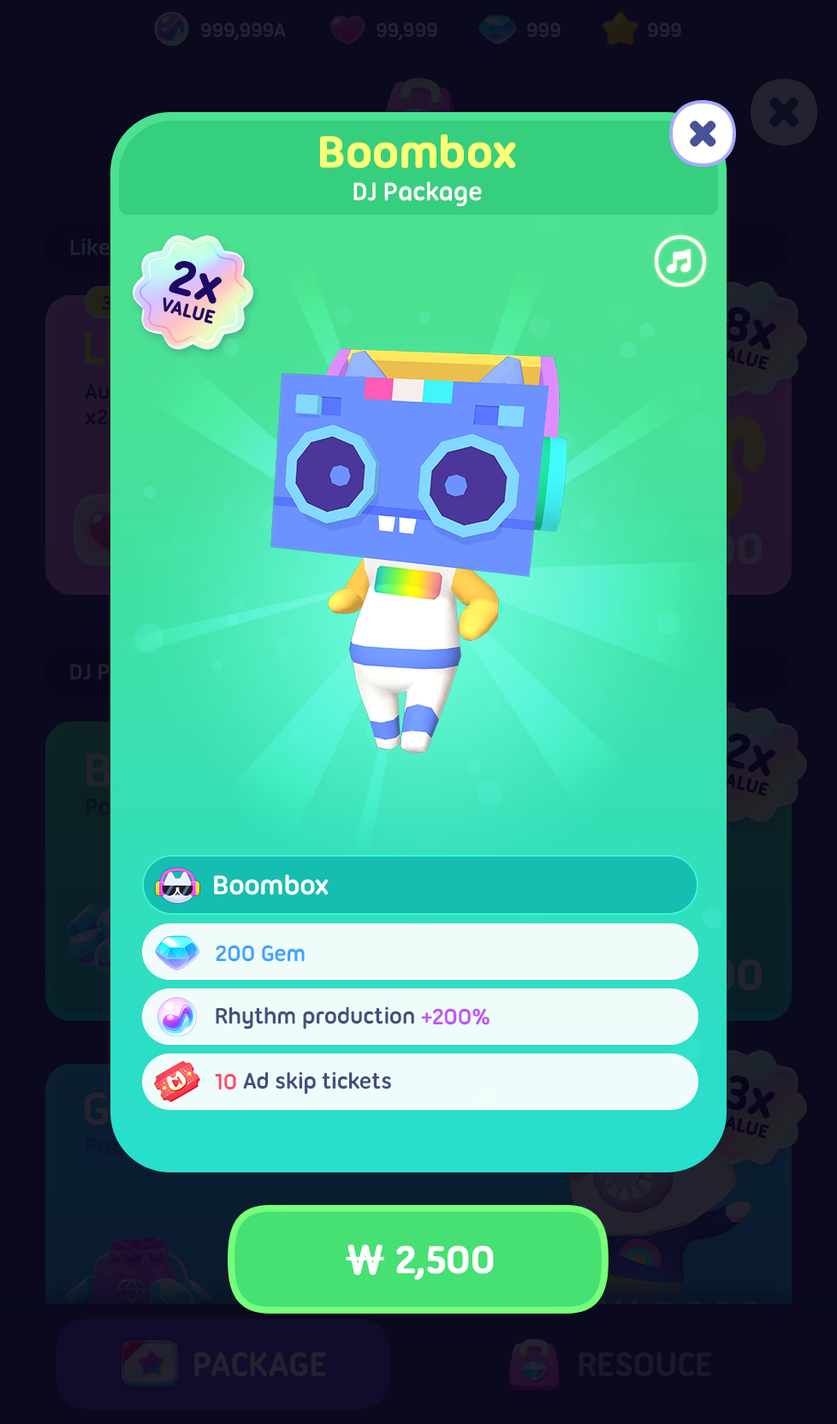
<style>
.page{position:relative;width:837px;height:1424px;background:#0a091e}
.page>*{position:absolute;margin:0}
.t1{font:47.9px "UbuntuTitling-Bold";letter-spacing:-0.025em;color:#fbff76;font-weight:bold}
.t2{font:27.4px "UbuntuTitling-Bold";letter-spacing:-0.025em;color:#ffffff}
.t3{font:49.9px "UbuntuTitling-Bold";letter-spacing:-0.025em;color:#1d0a64;font-weight:bold}
.t4{font:19.6px "UbuntuTitling-Bold";letter-spacing:-0.025em;color:#1d0a64;text-transform:uppercase;font-weight:bold}
.t5{font:29.1px "UbuntuTitling-Bold";letter-spacing:-0.025em;color:#ffffff}
.t6{font:24px "UbuntuTitling-Bold";letter-spacing:-0.025em;color:#3ba4ff}
.t7{font:24px "UbuntuTitling-Bold";letter-spacing:-0.025em;color:#454e7b}
.t8{font:24px "UbuntuTitling-Bold";letter-spacing:-0.025em;color:#c053ff}
.t9{font:24px "UbuntuTitling-Bold";letter-spacing:-0.025em;color:#fe4c63}
.t10{font:41.1px "UbuntuTitling-Bold";letter-spacing:-0.04em;color:#ffffff;text-transform:uppercase;font-weight:bold}
.t11{font:41.1px "NanumSquareRoundOTFEB";letter-spacing:-0.04em;color:#ffffff;text-transform:uppercase;font-weight:bold}
</style>
<div class="page">
<p class="t1" style="left:320px;top:134px;width:196px;height:35px">Boombox</p>
<p class="t2" style="left:354px;top:181px;width:128px;height:25px">DJ Package</p>
<p class="t3" style="left:169px;top:261px;width:53px;height:43px;rotate:15deg">2x</p>
<p class="t4" style="left:163px;top:297px;width:53px;height:27px;rotate:15deg">Value</p>
<p class="t5" style="left:214px;top:875px;width:115px;height:20px">Boombox</p>
<p class="t6" style="left:216px;top:945px;width:89px;height:17px">200 Gem</p>
<p class="t7" style="left:216px;top:1007px;width:274px;height:23px">Rhythm production <span class="t8">+200%</span></p>
<p class="t7" style="left:215px;top:1072px;width:176px;height:23px"><span class="t9">10 </span>Ad skip tickets</p>
<p class="t10" style="left:346px;top:1245px;width:148px;height:36px"><span class="t11">₩ </span>2,500</p>
</div>
